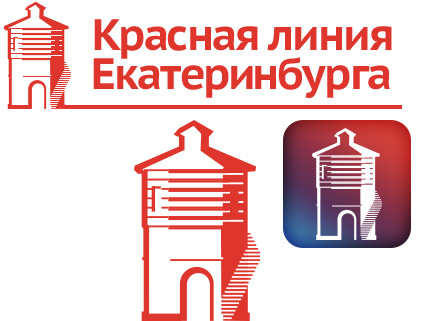
<style>
.page{position:relative;width:425px;height:321px;background:#ffffff}
.page>*{position:absolute;margin:0}
.t1{font:43.7px "PTSans-CaptionBold";letter-spacing:-0.05em;color:#de352c}
</style>
<div class="page">
<p class="t1" style="left:94px;top:19px;width:298px;height:40px">Красная линия</p>
<p class="t1" style="left:93px;top:57px;width:297px;height:41px">Екатеринбурга</p>
</div>
